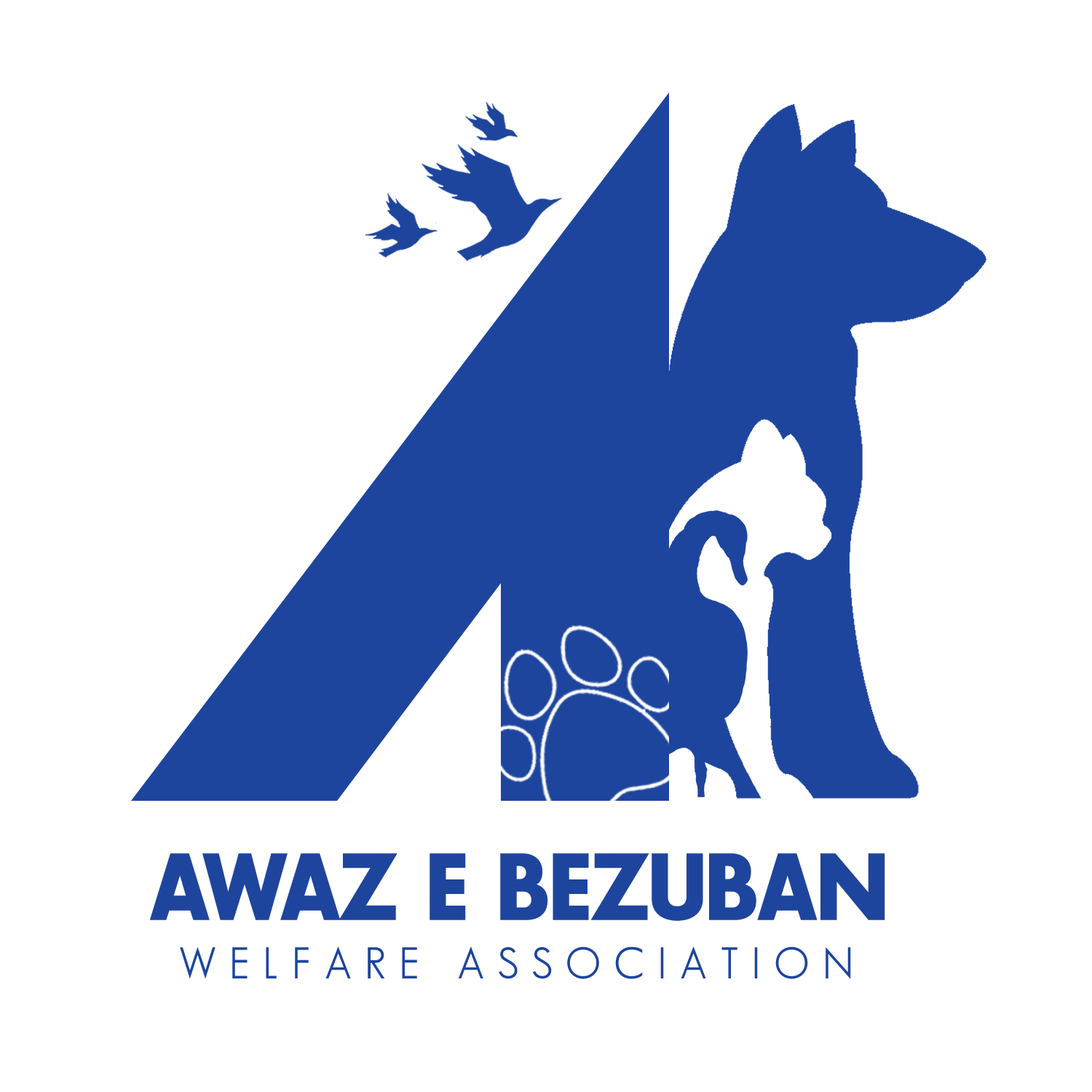
<style>
.page{position:relative;width:1092px;height:1092px;background:#ffffff}
.page>*{position:absolute;margin:0}
.t1{font:92.9px "SansSerifBldFLF";letter-spacing:-0.04em;color:#1e459d}
.t2{font:92.9px "SansSerifBldFLF";letter-spacing:-0.1em;color:#1e459d}
.t3{font:43.5px "SansSerifBookFLF";letter-spacing:0.295em;color:#1e459d}
</style>
<div class="page">
<p class="t1" style="left:149px;top:853px;width:736px;height:68px"><span class="t2">AW</span>AZ E BEZUBAN</p>
<p class="t3" style="left:180px;top:946px;width:671px;height:33px">WELFARE ASSOCIATION</p>
</div>
